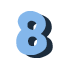
<style>
.page{position:relative;width:64px;height:64px;background:#ffffff}
.page>*{position:absolute;margin:0}
.t1{font:66px "Samba";color:#84b7eb}
.t2{font:66px "Samba"}
</style>
<div class="page">
<p class="t1" style="left:16px;top:11px;width:31px;height:44px">8</p>
<p class="t2" style="left:22px;top:14px;width:31px;height:44px">8</p>
</div>
